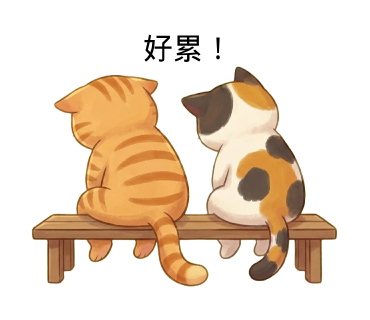
<style>
.page{position:relative;width:370px;height:320px;background:#ffffff}
.page>*{position:absolute;margin:0}
.t1{font:30px "DroidSansFallback";color:#000000}
</style>
<div class="page">
<p class="t1" style="left:144px;top:34px;width:76px;height:28px">好累！</p>
</div>
